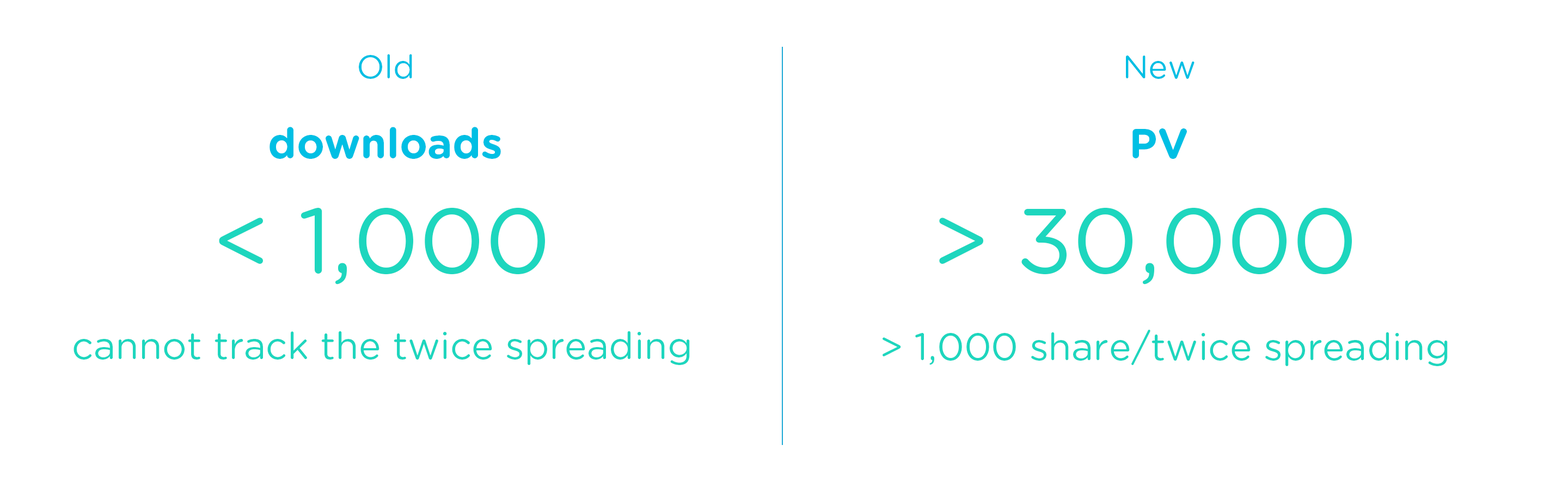
<style>
.page{position:relative;width:1568px;height:482px;background:#ffffff}
.page>*{position:absolute;margin:0}
.t1{font:32.7px "GothamRounded-Book";color:#00bfe4}
.t2{font:42.3px "GothamRounded-Bold";color:#00bfe4}
.t3{font:91.8px "GothamRounded-Book";color:#1dd6be}
.t4{font:37.8px "GothamRounded-Book";color:#1dd6be}
</style>
<div class="page">
<p class="t1" style="left:359px;top:54px;width:53px;height:25px">Old</p>
<p class="t1" style="left:1126px;top:56px;width:69px;height:23px">New</p>
<p class="t2" style="left:270px;top:127px;width:231px;height:32px">downloads</p>
<p class="t2" style="left:1132px;top:128px;width:55px;height:31px">PV</p>
<p class="t3" style="left:219px;top:207px;width:326px;height:78px">&lt; 1,000</p>
<p class="t3" style="left:939px;top:207px;width:413px;height:78px">&gt; 30,000</p>
<p class="t4" style="left:883px;top:330px;width:565px;height:36px">&gt; 1,000 share/twice spreading</p>
<p class="t4" style="left:74px;top:331px;width:616px;height:34px">cannot track the twice spreading</p>
</div>
